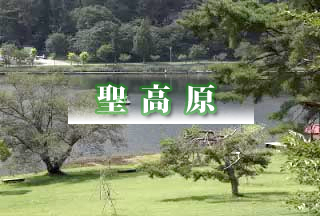
<style>
.page{position:relative;width:320px;height:216px}
.page>*{position:absolute;margin:0}
.t1{font:30px "KozMinPr6N-Heavy";letter-spacing:0.48em;color:#ffffff}
</style>
<div class="page">
<p class="t1" style="left:97px;top:84px;width:118px;height:29px">聖高原</p>
</div>
